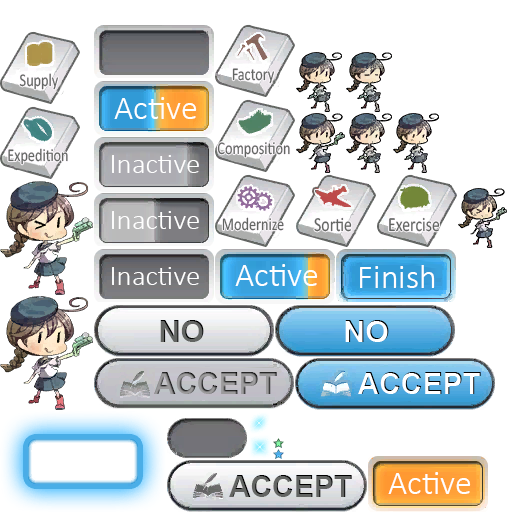
<style>
.page{position:relative;width:512px;height:512px;background:#ffffff}
.page>*{position:absolute;margin:0}
.t1{font:18px "Calibri";color:#636563;scale:0.79 1}
.t2{font:34px "Calibri-Light";color:#ffffff}
.t3{font:29px "Calibri-Light";color:#ffffff}
.t4{font:20px "Calibri";color:#636563;scale:0.79 1}
.t5{font:31px "Arial-BoldMT";color:#636563}
.t6{font:31px "Arial-BoldMT";color:#ffffff}
.t7{font:30px "Arial-BoldMT"}
.t8{font:30px "Arial-BoldMT";color:#ffffff}
.t9{font:30px "Arial-BoldMT";color:#636563}
</style>
<div class="page">
<p class="t1" style="left:19px;top:73px;width:39px;height:17px">Supply</p>
<p class="t1" style="left:232px;top:68px;width:42px;height:16px">Factory</p>
<p class="t2" style="left:114px;top:97px;width:83px;height:22px">Active</p>
<p class="t1" style="left:8px;top:148px;width:60px;height:17px">Expedition</p>
<p class="t1" style="left:217px;top:142px;width:73px;height:16px">Composition</p>
<p class="t3" style="left:112px;top:155px;width:87px;height:18px">Inactive</p>
<p class="t3" style="left:112px;top:211px;width:87px;height:18px">Inactive</p>
<p class="t1" style="left:222px;top:217px;width:62px;height:14px">Modernize</p>
<p class="t4" style="left:314px;top:217px;width:38px;height:15px">Sortie</p>
<p class="t4" style="left:389px;top:217px;width:51px;height:15px">Exercise</p>
<p class="t3" style="left:112px;top:267px;width:87px;height:18px">Inactive</p>
<p class="t2" style="left:235px;top:264px;width:83px;height:22px">Active</p>
<p class="t2" style="left:360px;top:265px;width:75px;height:23px">Finish</p>
<p class="t5" style="left:160px;top:320px;width:44px;height:22px">NO</p>
<p class="t6" style="left:345px;top:320px;width:44px;height:22px">NO</p>
<p class="t7" style="left:154px;top:372px;width:123px;height:22px">ACCEPT</p>
<p class="t8" style="left:358px;top:372px;width:123px;height:22px">ACCEPT</p>
<p class="t2" style="left:388px;top:472px;width:83px;height:22px">Active</p>
<p class="t9" style="left:229px;top:475px;width:123px;height:22px">ACCEPT</p>
</div>
